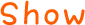
<style>
.page{position:relative;width:85px;height:25px;background:#ffffff}
.page>*{position:absolute;margin:0}
.t1{font:41.7px "HYLiLiTiW";letter-spacing:0.06em;color:#ff5b02}
</style>
<div class="page">
<p class="t1" style="left:0px;top:0px;width:85px;height:25px">Show</p>
</div>
